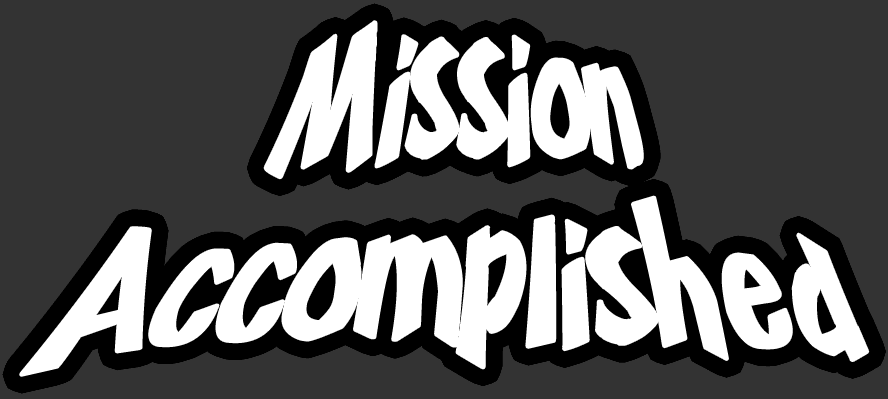
<style>
.page{position:relative;width:888px;height:399px;background:#333333}
.page>*{position:absolute;margin:0}
.t1{font:158.7px/143.8px "Frosty'sWinterland";letter-spacing:-0.005em;color:#ffffff;scale:1.22 1}
</style>
<div class="page">
<p class="t1" style="left:21px;top:22px;width:847px;height:353px;text-align:center">Mission Accomplished</p>
</div>
